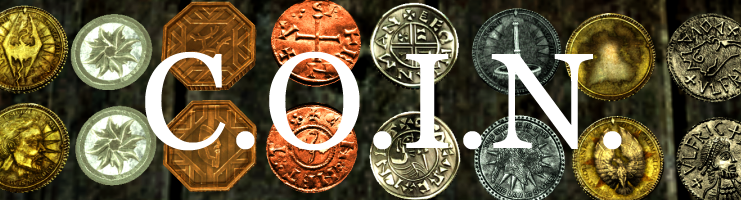
<style>
.page{position:relative;width:741px;height:200px}
.page>*{position:absolute;margin:0}
.t1{font:135.6px "Georgia";color:#ffffff}
</style>
<div class="page">
<p class="t1" style="left:145px;top:51px;width:477px;height:100px">C.O.I.N.</p>
</div>
